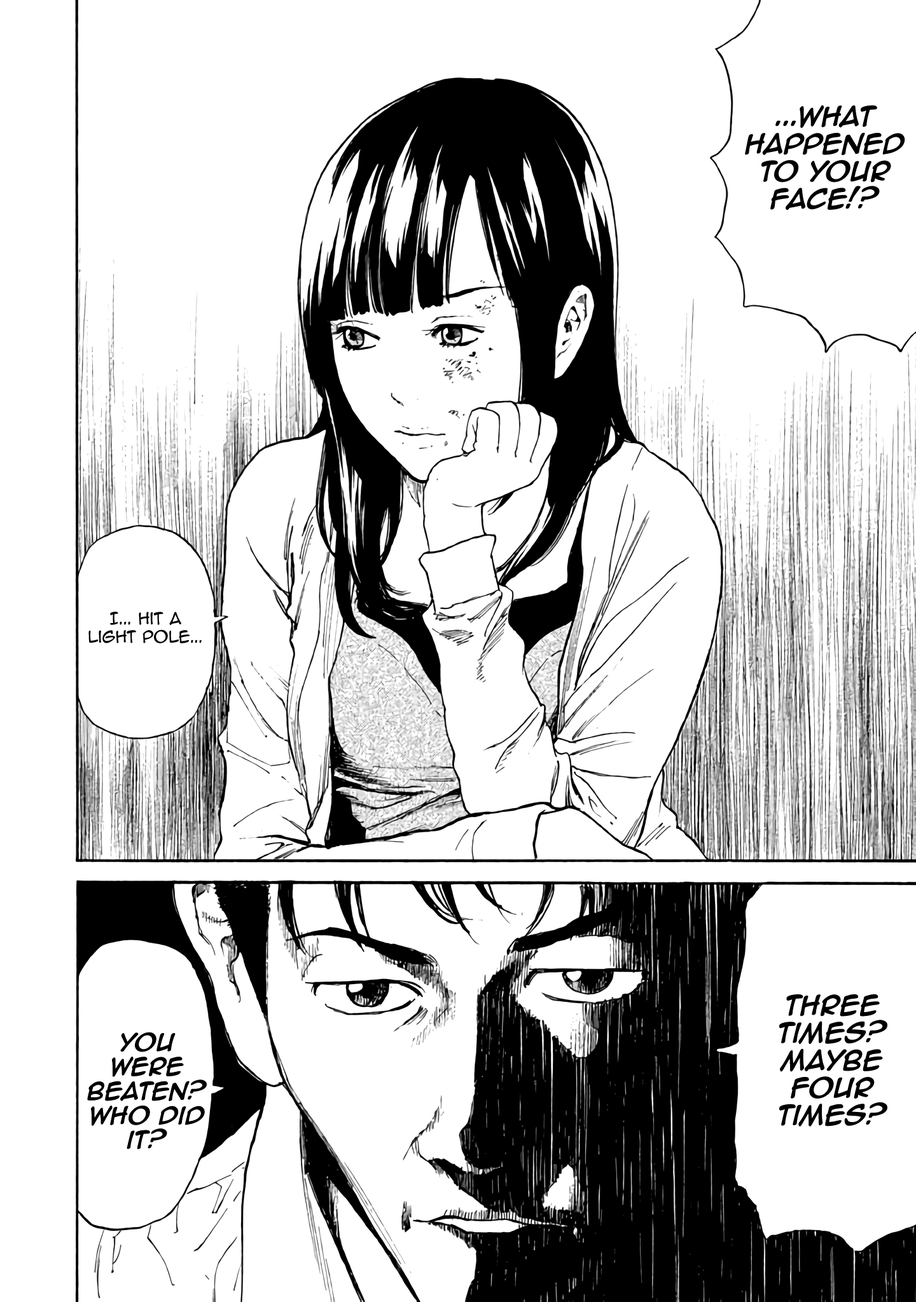
<style>
.page{position:relative;width:916px;height:1302px;background:#ffffff}
.page>*{position:absolute;margin:0}
.t1{font:22.9px "AnimeAce2.0BB-Bold";color:#000000}
.t2{font:15.3px "AnimeAce2.0BB";color:#000000}
.t3{font:20.3px "AnimeAce2.0BB-Bold";color:#000000}
</style>
<div class="page">
<p class="t1" style="left:745px;top:105px;width:160px;height:105px;text-align:center">...What happened to your face!?</p>
<p class="t2" style="left:88px;top:612px;width:114px;height:32px;text-align:center">I... hit a light pole...</p>
<p class="t1" style="left:779px;top:995px;width:108px;height:132px;text-align:center">three times?  maybe four times?</p>
<p class="t3" style="left:87px;top:1032px;width:120px;height:118px;text-align:center">you were beaten? who did it?</p>
</div>
